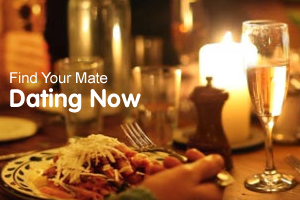
<style>
.page{position:relative;width:300px;height:200px}
.page>*{position:absolute;margin:0}
.t1{font:15px/24px "ArialMT";letter-spacing:-0.01em;color:#ffffff}
.t2{font:25px/24px "VAGRounded-Bold";letter-spacing:0.01em;color:#ffffff}
</style>
<div class="page">
<p class="t1" style="left:10px;top:72px;width:131px;height:41px">Find Your Mate<br><span class="t2">Dating Now</span></p>
</div>
